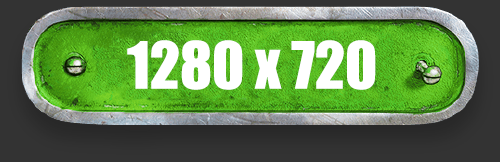
<style>
.page{position:relative;width:500px;height:162px}
.page>*{position:absolute;margin:0}
.t1{font:60px "Impact";color:#ffffff}
</style>
<div class="page">
<p class="t1" style="left:127px;top:40px;width:249px;height:50px">1280 x 720</p>
</div>
